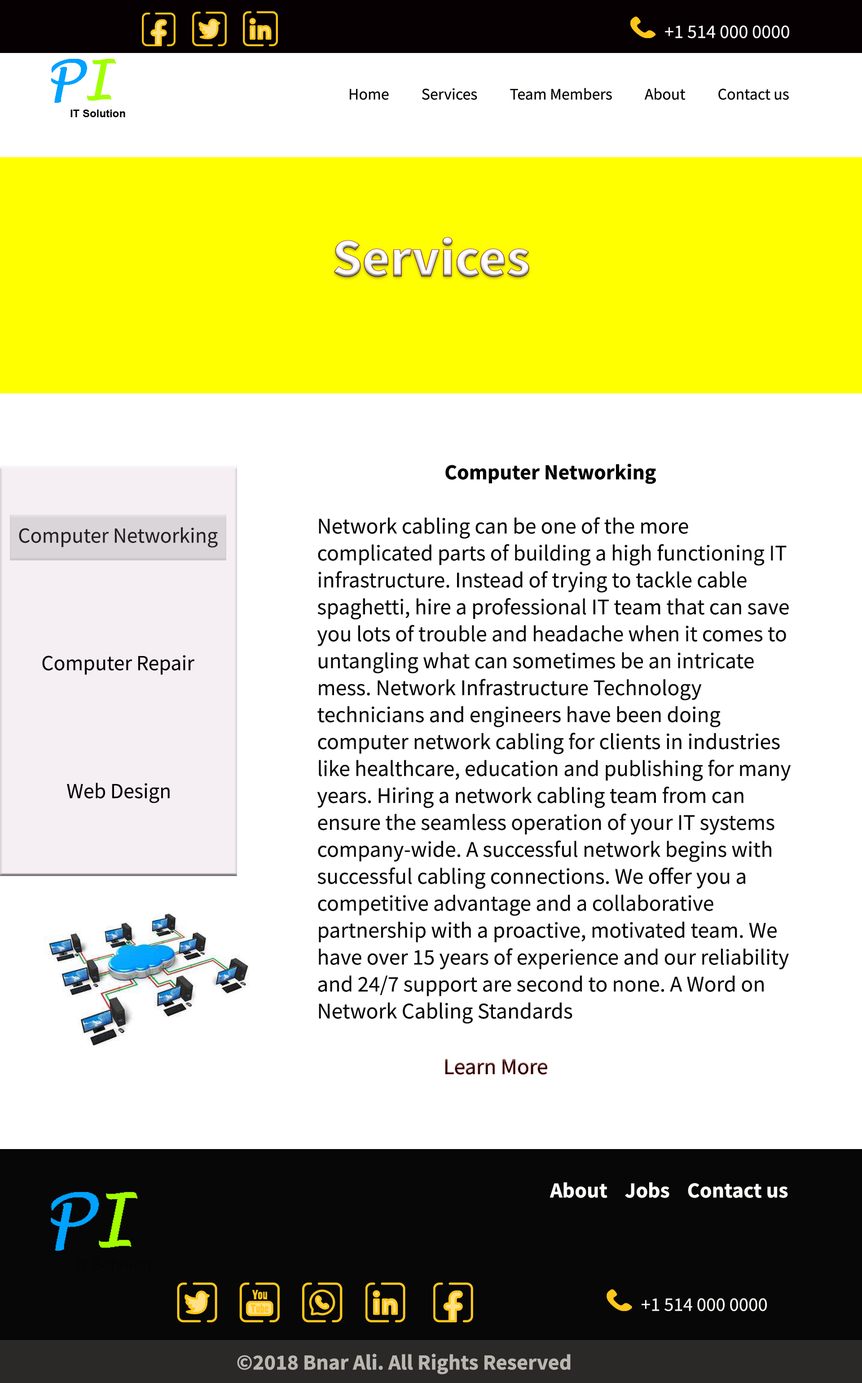
<style>
.page{position:relative;width:862px;height:1383px;background:#ffffff}
.page>*{position:absolute;margin:0}
.t1{font:53.9px "SourceSansRoman-Bold";color:#fefcfd}
.t2{font:21.6px "SourceSansRoman-Bold";color:#050505}
.t3{font:22.5px "SourceSansRoman-Regular";color:#090909}
.t4{font:21.6px "SourceSansRoman-Regular";color:#222222}
.t5{font:21.6px "SourceSansRoman-Regular";color:#050505}
.t6{font:22.5px "SourceSansRoman-Regular"}
</style>
<div class="page">
<p class="t1" style="left:334px;top:237px;width:195px;height:40px">Services</p>
<p class="t2" style="left:445px;top:463px;width:211px;height:21px">Computer Networking</p>
<p class="t3" style="left:317px;top:517px;width:474px;height:507px">Network cabling can be one of the more complicated parts of building a high functioning IT infrastructure. Instead of trying to tackle cable spaghetti, hire a professional IT team that can save you lots of trouble and headache when it comes to untangling what can sometimes be an intricate mess. Network Infrastructure Technology technicians and engineers have been doing computer network cabling for clients in industries like healthcare, education and publishing for many years. Hiring a network cabling team from can ensure the seamless operation of your IT systems company-wide. A successful network begins with successful cabling connections. We offer you a competitive advantage and a collaborative partnership with a proactive, motivated team. We have over 15 years of experience and our reliability and 24/7 support are second to none. A Word on Network Cabling Standards</p>
<p class="t4" style="left:19px;top:527px;width:199px;height:21px">Computer Networking</p>
<p class="t5" style="left:42px;top:655px;width:153px;height:20px">Computer Repair</p>
<p class="t5" style="left:67px;top:783px;width:103px;height:20px">Web Design</p>
<p class="t6" style="left:445px;top:1059px;width:102px;height:16px">Learn More</p>
</div>
